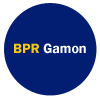
<style>
.page{position:relative;width:100px;height:100px;background:#011e73}
.page>*{position:absolute;margin:0}
.t1{font:14px "FranklinGothic-Demi";color:#ffffff}
.t2{font:14px "FranklinGothic-Demi";color:#f7c90f}
</style>
<div class="page">
<p class="t1" style="left:14px;top:43px;width:72px;height:11px"><span class="t2">BPR </span>Gamon</p>
</div>
